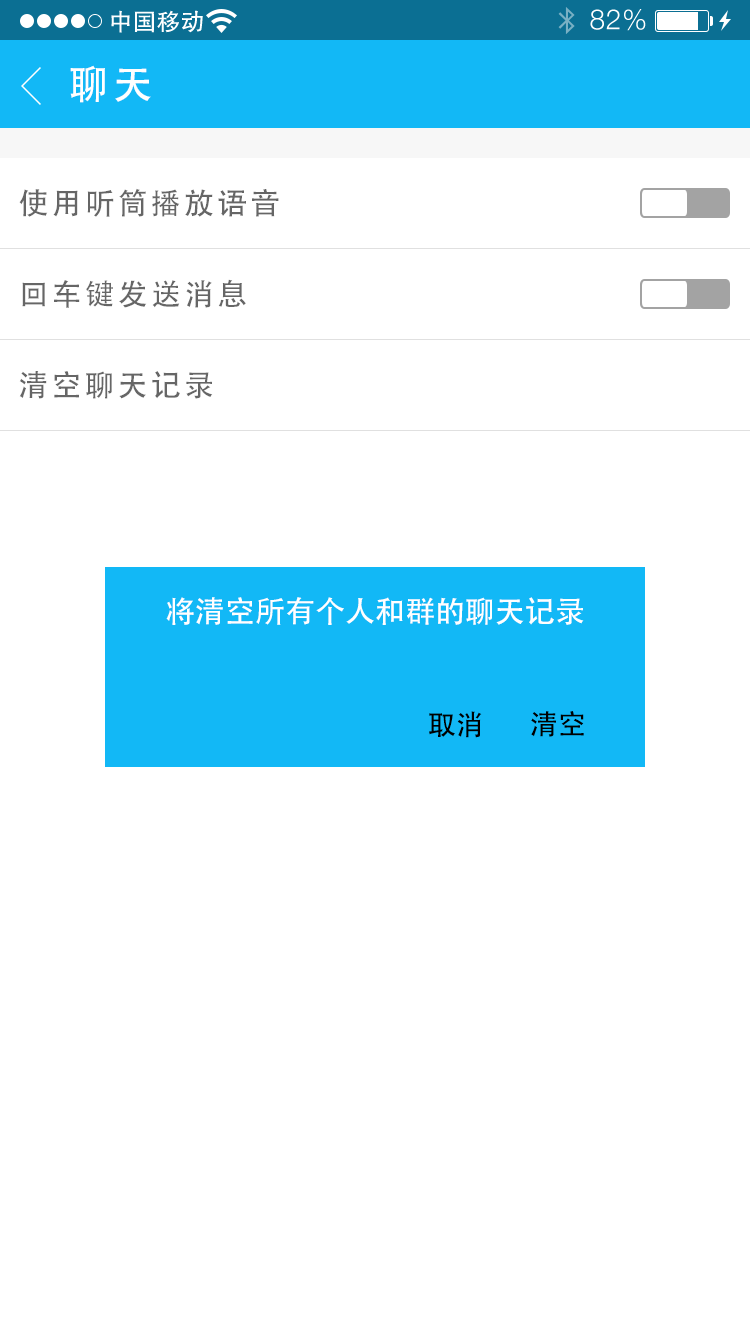
<style>
.page{position:relative;width:750px;height:1334px;background:#ffffff}
.page>*{position:absolute;margin:0}
.t1{font:40px "AdobeHeitiStd-Regular";letter-spacing:0.104em;color:#ffffff}
.t2{font:30px "AdobeHeitiStd-Regular";letter-spacing:0.104em;color:#666666}
.t3{font:30px "AdobeHeitiStd-Regular";color:#ffffff}
.t4{font:28px "AdobeHeitiStd-Regular";color:#000000}
</style>
<div class="page">
<p class="t1" style="left:70px;top:65px;width:81px;height:38px">聊天</p>
<p class="t2" style="left:19px;top:188px;width:260px;height:29px">使用听筒播放语音</p>
<p class="t2" style="left:22px;top:279px;width:224px;height:29px">回车键发送消息</p>
<p class="t2" style="left:19px;top:371px;width:194px;height:28px">清空聊天记录</p>
<p class="t3" style="left:166px;top:597px;width:418px;height:28px">将清空所有个人和群的聊天记录</p>
<p class="t4" style="left:429px;top:711px;width:53px;height:27px">取消</p>
<p class="t4" style="left:531px;top:711px;width:53px;height:26px">清空</p>
</div>
